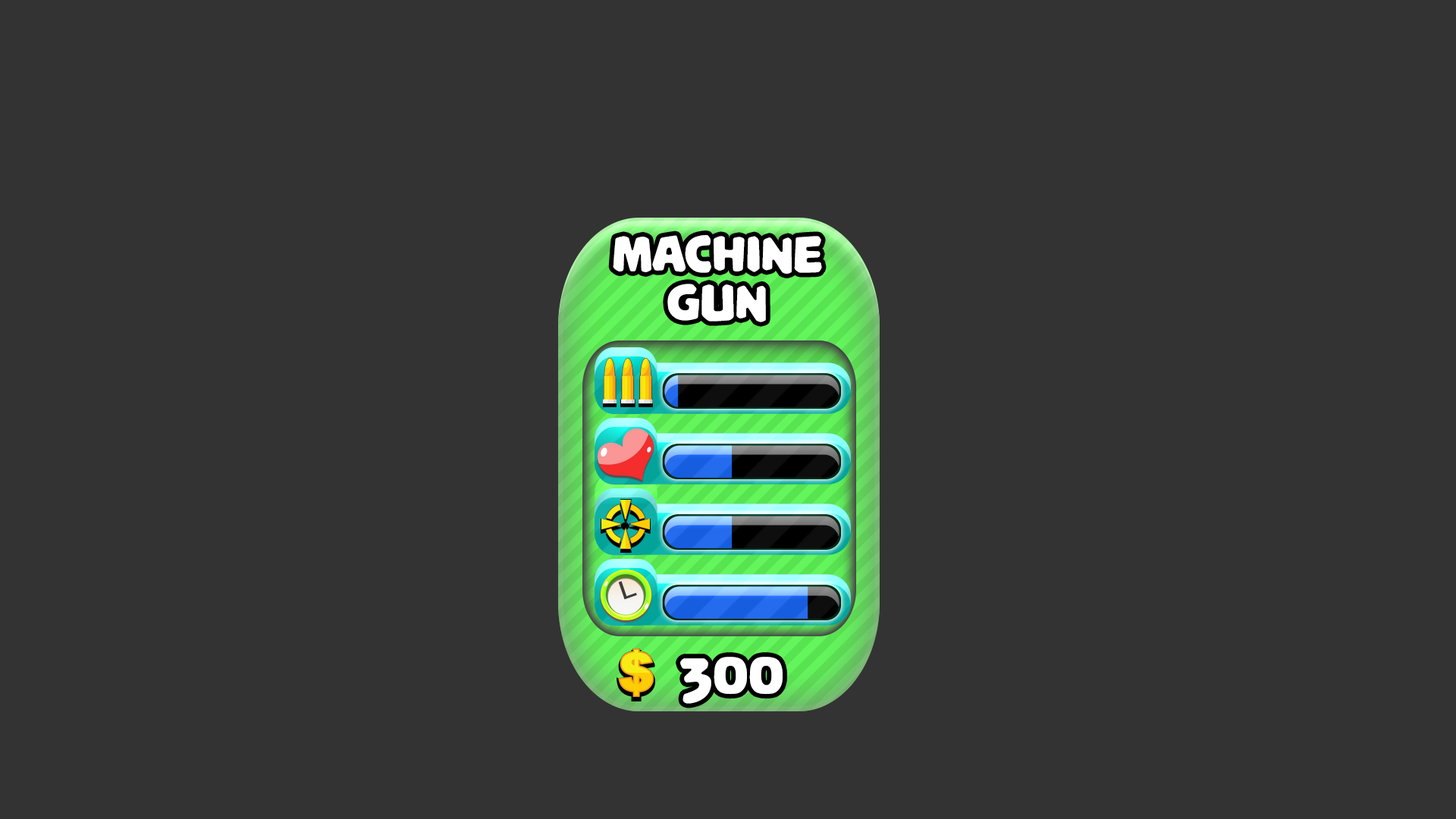
<style>
.page{position:relative;width:1456px;height:819px;background:#333333}
.page>*{position:absolute;margin:0}
.t1{font:54.9px/48.1px "PalameciaTitling-Regular";letter-spacing:-0.02em;color:#ffffff}
.t2{font:61.8px "PalameciaTitling-Regular";letter-spacing:-0.02em;color:#ffffff}
</style>
<div class="page">
<p class="t1" style="left:613px;top:235px;width:209px;height:87px;text-align:center">Machine<br>Gun</p>
<p class="t2" style="left:680px;top:657px;width:103px;height:47px">300</p>
</div>
